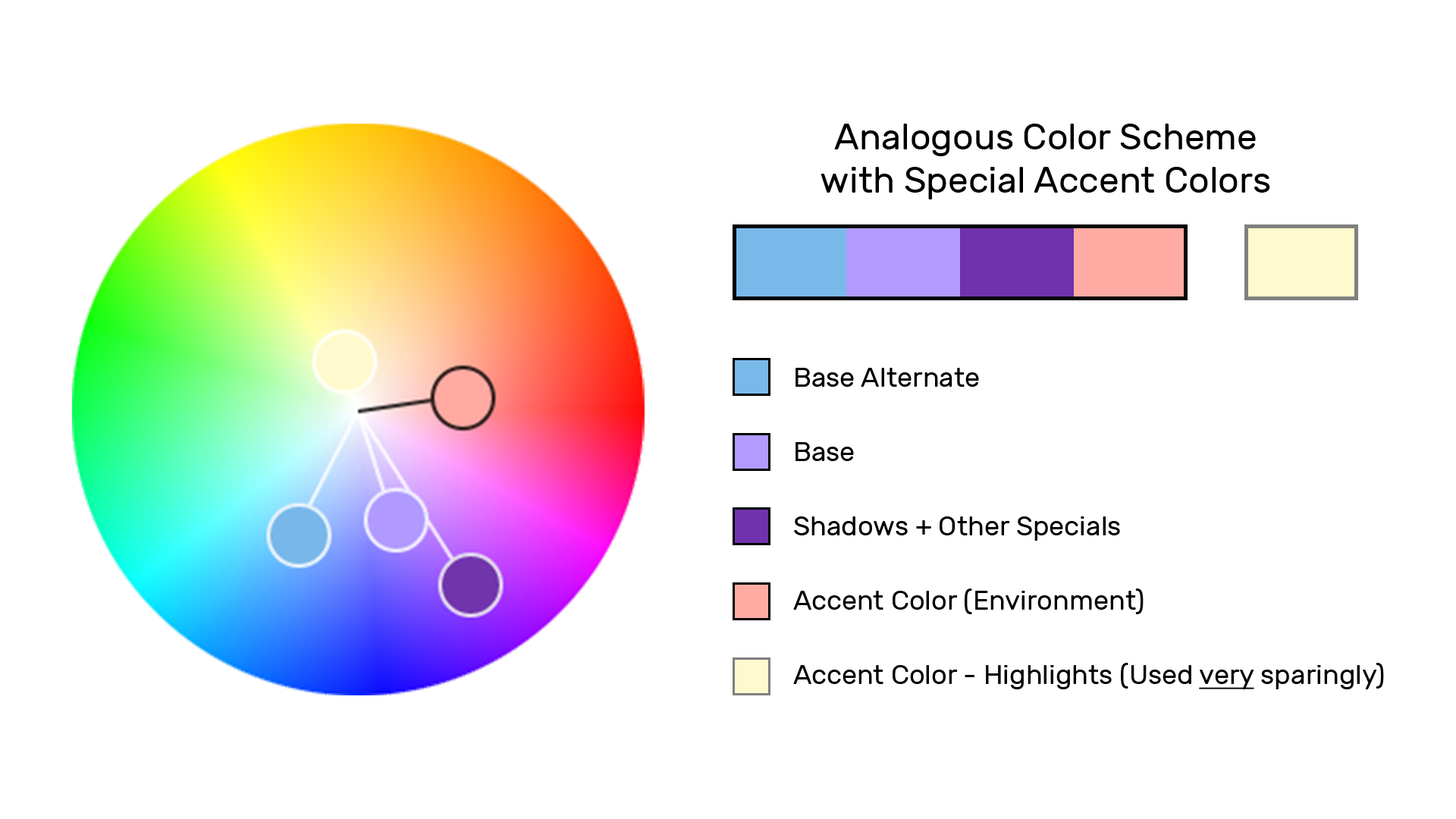
<style>
.page{position:relative;width:1456px;height:819px;background:#ffffff}
.page>*{position:absolute;margin:0}
.t1{font:36.4px "Rubik-Regular";color:#000000}
.t2{font:27.3px/74.3px "Rubik-Regular";color:#000000}
.t3{font:27.3px/74.3px "Rubik-Regular";color:#000000;text-decoration:underline}
</style>
<div class="page">
<p class="t1" style="left:821px;top:124px;width:449px;height:75px;text-align:center">Analogous Color Scheme<br>with Special Accent Colors</p>
<p class="t2" style="left:793px;top:368px;width:591px;height:321px">Base Alternate<br>Base<br>Shadows + Other Specials<br>Accent Color (Environment)<br>Accent Color - Highlights (Used <span class="t3">very</span> sparingly)</p>
</div>
